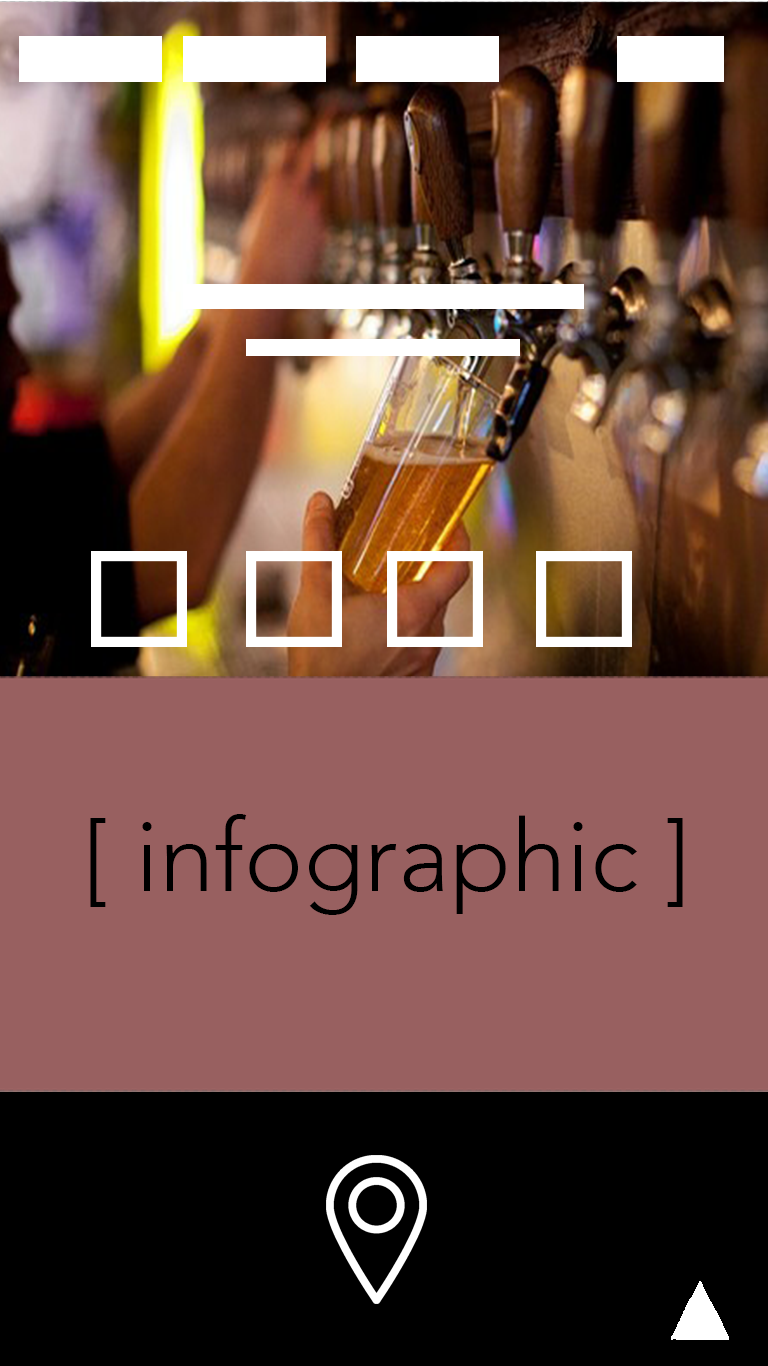
<style>
.page{position:relative;width:768px;height:1366px;background:#986060}
.page>*{position:absolute;margin:0}
.t1{font:100px "Avenir-Light";color:#000000}
</style>
<div class="page">
<p class="t1" style="left:90px;top:814px;width:593px;height:101px">[ infographic ]</p>
</div>
